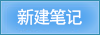
<style>
.page{position:relative;width:100px;height:35px}
.page>*{position:absolute;margin:0}
.t1{font:17px "SimHei";letter-spacing:-0.05em;color:#ffffff}
</style>
<div class="page">
<p class="t1" style="left:17px;top:8px;width:65px;height:17px">新建笔记</p>
</div>
